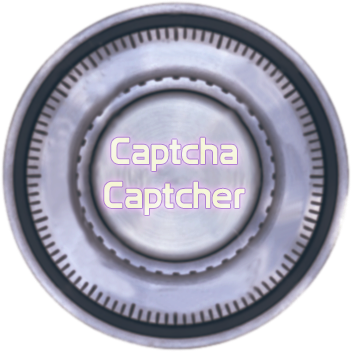
<style>
.page{position:relative;width:351px;height:355px;background:#ffffff}
.page>*{position:absolute;margin:0}
.t1{font:36.9px "Prototype";color:#f6f6de}
</style>
<div class="page">
<p class="t1" style="left:104px;top:137px;width:141px;height:78px;text-align:center">Captcha<br>Captcher</p>
</div>
